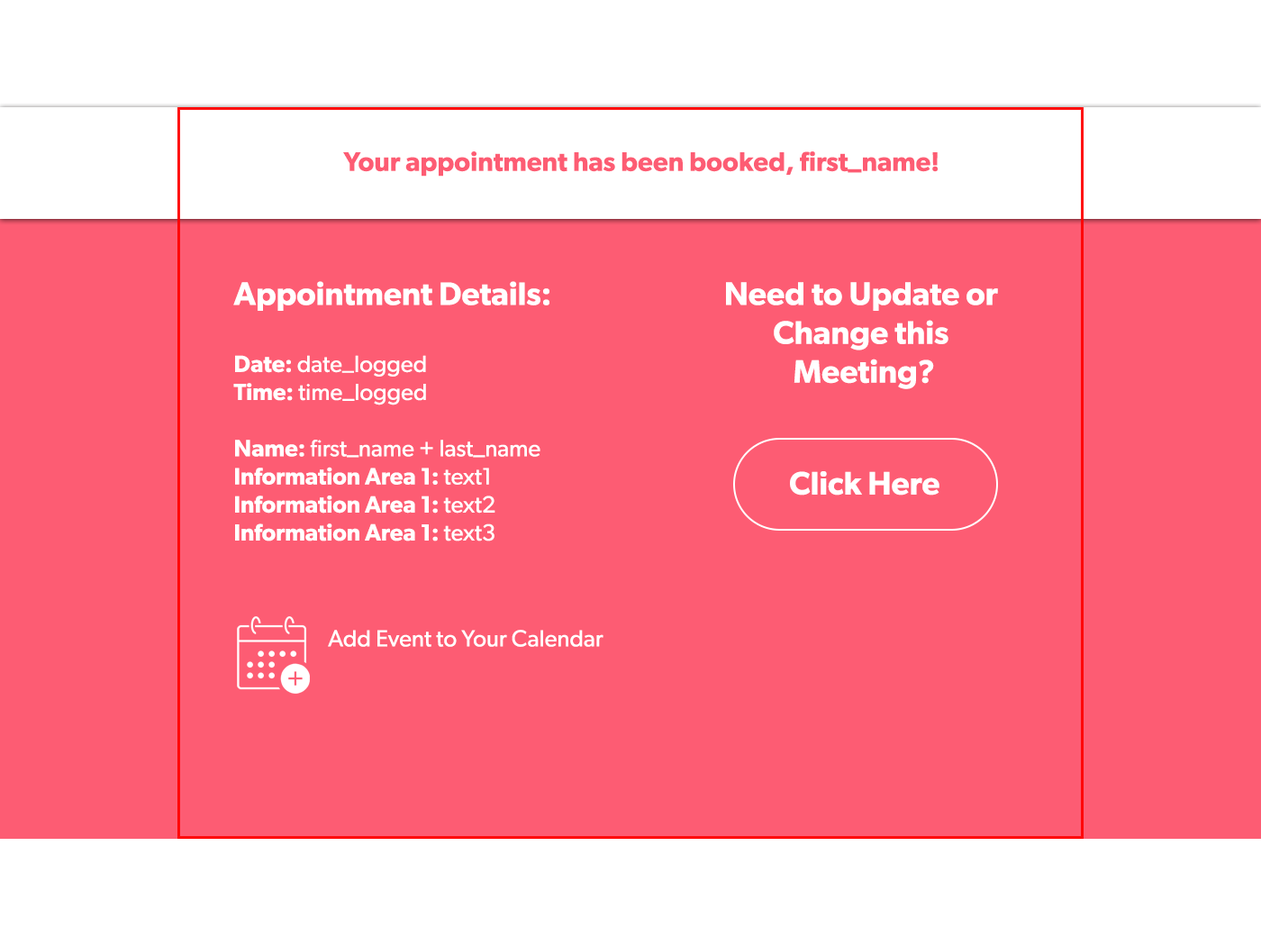
<style>
.page{position:relative;width:1261px;height:946px;background:#fd5c73}
.page>*{position:absolute;margin:0}
.t1{font:27px "Gibson-SemiBold";color:#fd5c73}
.t2{font:23.4px "Gibson-Regular";color:#ffffff}
.t3{font:32.4px "Gibson-SemiBold";color:#ffffff}
.t4{font:23.4px "Gibson-SemiBold";color:#ffffff}
</style>
<div class="page">
<p class="t1" style="left:343px;top:151px;width:595px;height:26px">Your appointment has been booked, first_name!</p>
<p class="t2" style="left:233px;top:281px;width:316px;height:260px"><span class="t3">Appointment Details:<br><br></span><span class="t4">Date: </span>date_logged<br><span class="t4">Time: </span>time_logged<br><br><span class="t4">Name: </span>first_name + last_name<br><span class="t4">Information Area 1: </span>text1<br><span class="t4">Information Area 1: </span>text2<br><span class="t4">Information Area 1: </span>text3</p>
<p class="t3" style="left:726px;top:282px;width:272px;height:107px;text-align:center">Need to Update or <br>Change this <br>Meeting?</p>
<p class="t3" style="left:790px;top:471px;width:149px;height:24px">Click Here</p>
<p class="t2" style="left:328px;top:630px;width:275px;height:17px">Add Event to Your Calendar</p>
</div>
